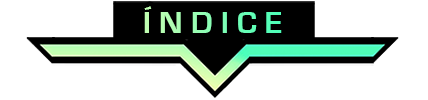
<style>
.page{position:relative;width:428px;height:100px;background:#ffffff}
.page>*{position:absolute;margin:0}
.t1{font:32.1px "EurostileBold";letter-spacing:0.26em;text-transform:uppercase}
</style>
<div class="page">
<p class="t1" style="left:144px;top:6px;width:138px;height:27px">Índice</p>
</div>
